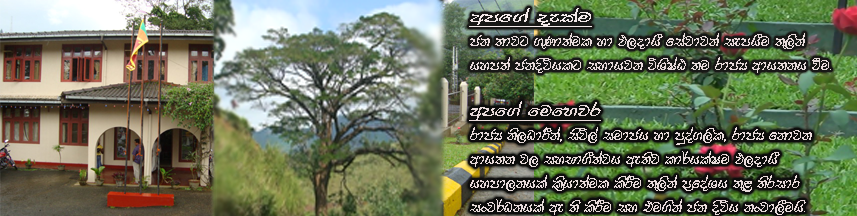
<style>
.page{position:relative;width:857px;height:216px}
.page>*{position:absolute;margin:0}
.t1{font:20px "FMDeranax";color:#e8dbdb}
.t2{font:20.4px "FMDeranax";color:#f4eaea;text-decoration:underline;scale:1.58 1}
.t3{font:22px "FMDeranax";color:#e8dbdb;text-decoration:underline;scale:1.26 1}
</style>
<div class="page">
<p class="t1" style="left:469px;top:8px;width:362px;height:65px"><span class="t2">wmf.a oelau<br></span>ck ;djg .=Kd;aul yd M,odhS fiajdjka iemhSu ;=,ska <br>hym;a ckosúhlg iydhjk úYsIaG ;u rdcH wdh;kh ùu¡</p>
<p class="t1" style="left:469px;top:101px;width:343px;height:114px"><span class="t3">wmf.a fufyjr<br></span>rdcH ks,OdrSka" isú,a iudch yd mqoa.,sl" rdcH fkdjk <br>wdh;k j, iyNd.S;ajh we;sj ld¾hlaIu M,odhS <br>hymd,khla l%shd;aul lsrSu ;=,ska m%foaYh ;=&lt; ;sridr <br>ixj¾Okhla we ;s lsrSu iy tu.ska ck osúh kxjd,Suhs¡</p>
</div>
